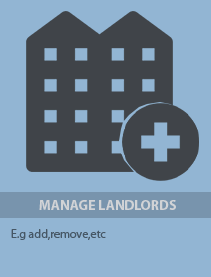
<style>
.page{position:relative;width:211px;height:277px;background:#92b5d3}
.page>*{position:absolute;margin:0}
.t1{font:14px "MyriadPro-Bold";color:#e0dddd}
.t2{font:12px "MyriadPro-Regular";color:#465765}
</style>
<div class="page">
<p class="t1" style="left:39px;top:200px;width:137px;height:10px;opacity:0.86">MANAGE LANDLORDS</p>
<p class="t2" style="left:11px;top:229px;width:95px;height:11px">E.g add,remove,etc</p>
</div>
